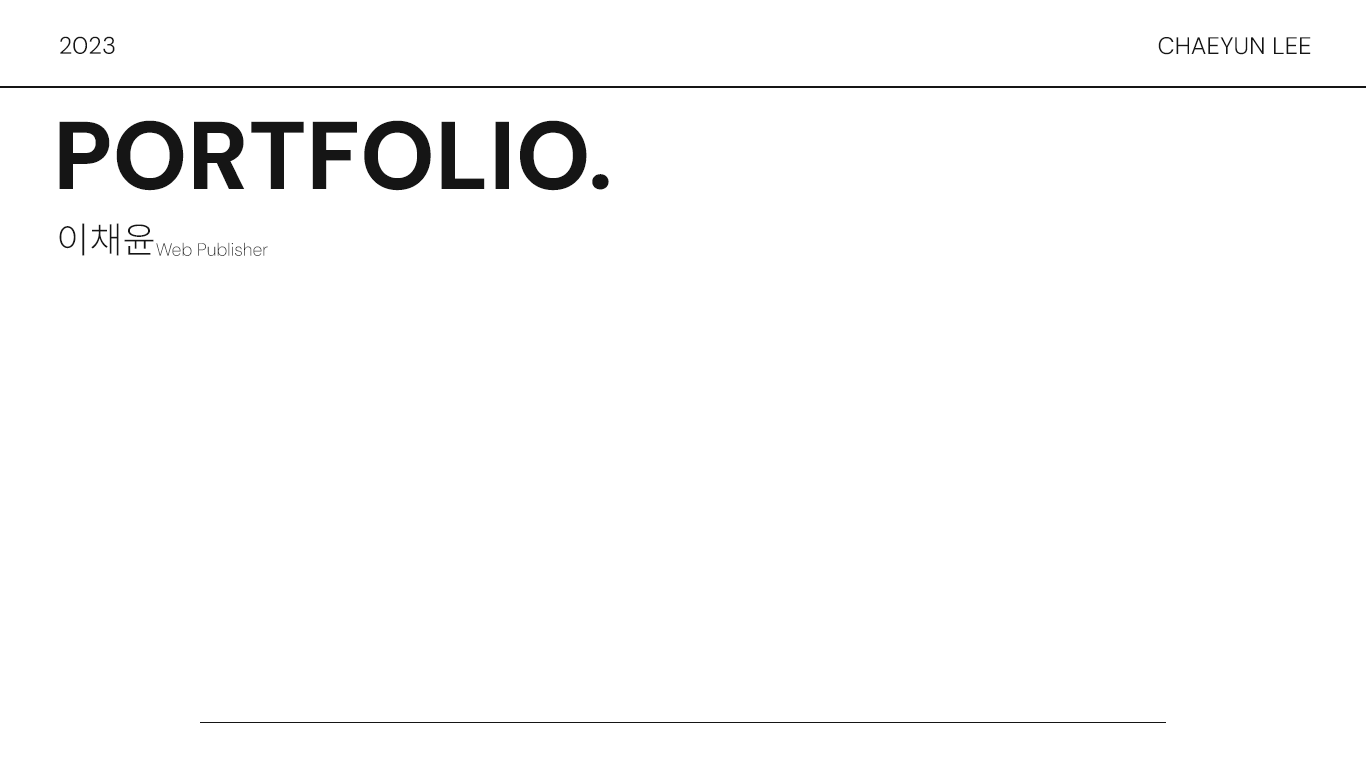
<style>
.page{position:relative;width:1366px;height:768px;background:#ffffff}
.page>*{position:absolute;margin:0}
.t1{font:24px "DMSans-Light";color:#151515}
.t2{font:96px "DMSans-ExtraBold";color:#151515}
.t3{font:36px "NotoSansKR-Light";color:#151515}
.t4{font:18px "DMSans-ExtraLight";color:#151515}
</style>
<div class="page">
<p class="t1" style="left:60px;top:36px;width:55px;height:18px">2023</p>
<p class="t1" style="left:1158px;top:37px;width:153px;height:18px">CHAEYUN LEE</p>
<p class="t2" style="left:59px;top:120px;width:550px;height:71px">PORTFOLIO.</p>
<p class="t3" style="left:59px;top:223px;width:95px;height:33px">이채윤</p>
<p class="t4" style="left:156px;top:242px;width:112px;height:14px">Web Publisher</p>
</div>
